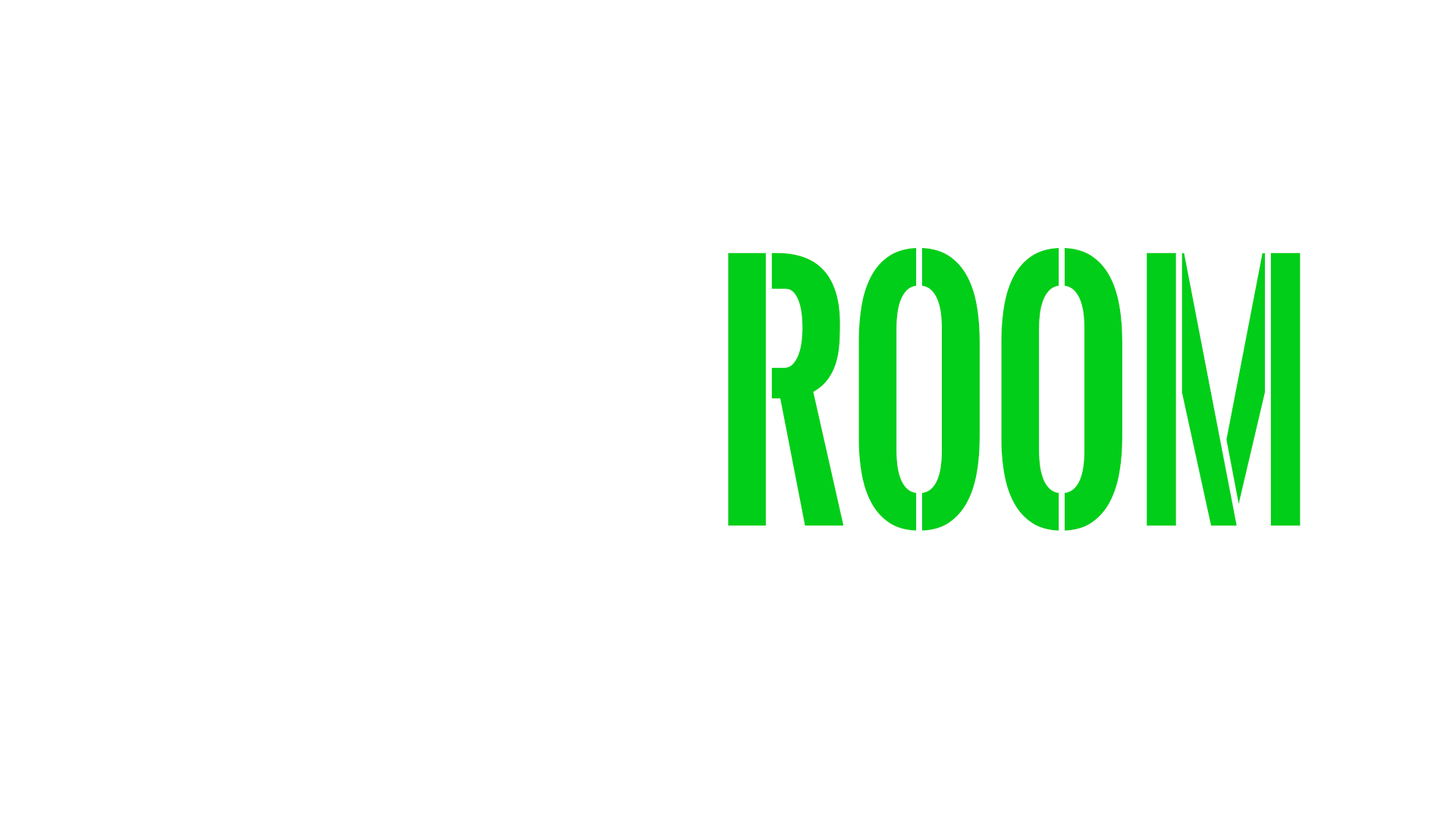
<style>
.page{position:relative;width:1456px;height:819px;background:#ffffff}
.page>*{position:absolute;margin:0}
.t1{font:313.2px "OswaldStencil-Bold";color:#00ce18;scale:0.78 1}
</style>
<div class="page">
<p class="t1" style="left:728px;top:247px;width:573px;height:284px">ROOM</p>
</div>
